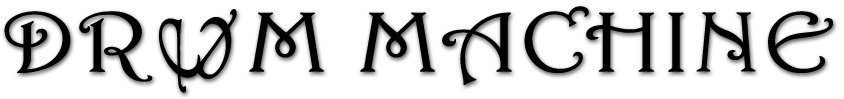
<style>
.page{position:relative;width:844px;height:99px;background:#ffffff}
.page>*{position:absolute;margin:0}
.t1{font:86.1px "Harrington";color:#000000;font-weight:bold;scale:1.2 1}
.t2{font:125.5px "Harrington";color:#000000;font-weight:bold;scale:0.6 1}
.t3{font:125.5px "Harrington";color:#000000;font-weight:bold;scale:0.59 1}
</style>
<div class="page">
<p class="t1" style="left:4px;top:6px;width:829px;height:79px">DR    M MACHINE</p>
<p class="t2" style="left:193px;top:9px;width:44px;height:70px;rotate:-167deg">e</p>
<p class="t3" style="left:159px;top:18px;width:42px;height:75px;rotate:-23deg">e</p>
</div>
